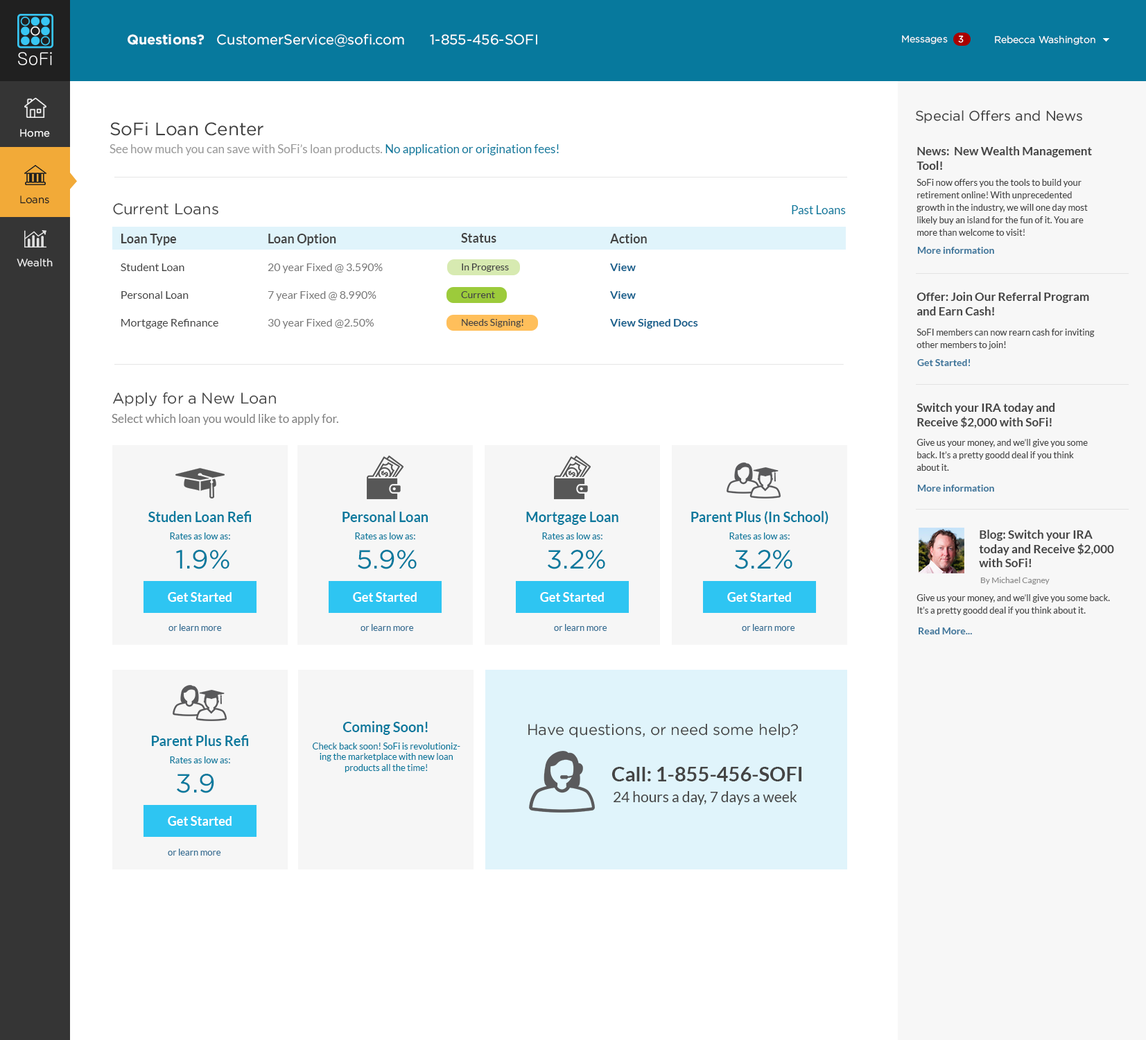
<style>
.page{position:relative;width:1146px;height:1040px;background:#ffffff}
.page>*{position:absolute;margin:0}
.t1{font:13.9px "Gotham-Book";color:#ffffff}
.t2{font:13.9px "Gotham-Bold";color:#ffffff}
.t3{font:9.7px "Gotham-Book";color:#fcfcfc}
.t4{font:9px "Gotham-Book";color:#ffffff}
.t5{font:9.7px "Gotham-Book";color:#ffffff}
.t6{font:13.9px "Gotham-Book";color:#444444}
.t7{font:18px "Gotham-Book";color:#3f3f3f}
.t8{font:10.4px "Gotham-Book";color:#ffffff}
.t9{font:11.8px "Lato-Regular";color:#989898}
.t10{font:11.8px "Lato-Regular";color:#07799d}
.t11{font:11.8px "Lato-Bold";color:#444444}
.t12{font:9px/12.5px "Lato-Regular";color:#444444}
.t13{font:10.4px "Gotham-Book";color:#202020}
.t14{font:15.3px "Gotham-Book";color:#444444}
.t15{font:11.1px/27.7px "Lato-Regular";color:#444444}
.t16{font:12.5px/27.7px "Lato-Bold";color:#444444}
.t17{font:11.1px/27.7px "Lato-Regular";color:#787878}
.t18{font:9.7px/27.7px "Lato-Regular";color:#444444}
.t19{font:11.1px/27.7px "Lato-Bold";color:#14608d}
.t20{font:10.4px "Gotham-Book";color:#efefef}
.t21{font:9.7px "Lato-Bold";color:#3a749a}
.t22{font:11.8px "Lato-Regular";color:#808080}
.t23{font:13.9px "Lato-Bold";color:#07799d}
.t24{font:9px "Lato-Regular";color:#07799d}
.t25{font:26.4px "Gotham-Book";color:#07799d}
.t26{font:8.3px "Lato-Regular";color:#8c8c8c}
.t27{font:12.5px "Lato-Bold";color:#ffffff}
.t28{font:9px "Lato-Regular";color:#316c92}
.t29{font:20.1px "Lato-Bold";color:#444444}
.t30{font:14.6px "Lato-Regular";color:#444444}
</style>
<div class="page">
<p class="t1" style="left:128px;top:34px;width:409px;height:13px"><span class="t2">Questions?</span>   CustomerService@sofi.com      1-855-456-SOFI</p>
<p class="t3" style="left:902px;top:35px;width:46px;height:9px">Messages</p>
<p class="t4" style="left:958px;top:35px;width:6px;height:8px">3</p>
<p class="t5" style="left:995px;top:35px;width:101px;height:10px">Rebecca Washington</p>
<p class="t6" style="left:916px;top:110px;width:167px;height:13px">Special Offers and News</p>
<p class="t7" style="left:110px;top:122px;width:154px;height:14px">SoFi Loan Center</p>
<p class="t8" style="left:20px;top:129px;width:30px;height:8px">Home</p>
<p class="t9" style="left:110px;top:144px;width:449px;height:11px">See how much you can save with SoFi’s loan products. <span class="t10">No application or origination fees!</span></p>
<p class="t11" style="left:917px;top:146px;width:175px;height:24px">News:  New Wealth Management Tool!</p>
<p class="t12" style="left:917px;top:179px;width:171px;height:57px">SoFi now offers you the tools to build your retirement online! With unprecedented growth in the industry, we will one day most likely buy an island for the fun of it. You are more than welcome to visit!</p>
<p class="t13" style="left:20px;top:196px;width:29px;height:8px">Loans</p>
<p class="t14" style="left:113px;top:203px;width:105px;height:12px">Current Loans</p>
<p class="t10" style="left:792px;top:205px;width:54px;height:9px">Past Loans</p>
<p class="t15" style="left:121px;top:234px;width:97px;height:95px"><span class="t16">Loan Type<br></span>Student Loan<br>Personal Loan<br>Mortgage Refinance</p>
<p class="t17" style="left:268px;top:234px;width:115px;height:95px"><span class="t16">Loan Option<br></span>20 year Fixed @ 3.590%<br>7 year Fixed @ 8.990%<br>30 year Fixed @2.50%</p>
<p class="t18" style="left:461px;top:233px;width:63px;height:94px"><span class="t16">Status<br></span>In Progress<br>Current<br>Needs Signing!</p>
<p class="t19" style="left:610px;top:234px;width:88px;height:95px"><span class="t16">Action<br></span>View<br>View<br>View Signed Docs</p>
<p class="t20" style="left:17px;top:258px;width:36px;height:9px">Wealth</p>
<p class="t21" style="left:917px;top:247px;width:77px;height:7px">More information</p>
<p class="t11" style="left:917px;top:292px;width:172px;height:24px">Offer: Join Our Referral Program and Earn Cash!</p>
<p class="t12" style="left:917px;top:329px;width:178px;height:21px">SoFI members can now rearn cash for inviting other members to join!</p>
<p class="t21" style="left:917px;top:359px;width:53px;height:7px">Get Started!</p>
<p class="t14" style="left:112px;top:392px;width:164px;height:14px">Apply for a New Loan</p>
<p class="t11" style="left:917px;top:403px;width:138px;height:26px">Switch your IRA today and <br>Receive $2,000 with SoFi!</p>
<p class="t22" style="left:112px;top:414px;width:226px;height:11px">Select which loan you would like to apply for.</p>
<p class="t12" style="left:917px;top:439px;width:171px;height:32px">Give us your money, and we’ll give you some back. It’s a pretty goodd deal if you think about it.</p>
<p class="t21" style="left:917px;top:485px;width:77px;height:7px">More information</p>
<p class="t23" style="left:148px;top:511px;width:103px;height:11px">Studen Loan Refi</p>
<p class="t23" style="left:343px;top:511px;width:85px;height:11px">Personal Loan</p>
<p class="t23" style="left:526px;top:512px;width:93px;height:13px">Mortgage Loan</p>
<p class="t23" style="left:691px;top:511px;width:138px;height:14px">Parent Plus (In School)</p>
<p class="t24" style="left:170px;top:533px;width:60px;height:7px">Rates as low as:</p>
<p class="t24" style="left:355px;top:533px;width:60px;height:7px">Rates as low as:</p>
<p class="t24" style="left:542px;top:533px;width:61px;height:7px">Rates as low as:</p>
<p class="t24" style="left:730px;top:533px;width:60px;height:7px">Rates as low as:</p>
<p class="t11" style="left:979px;top:530px;width:135px;height:37px">Blog: Switch your IRA today and Receive $2,000 with SoFi!</p>
<p class="t25" style="left:176px;top:550px;width:54px;height:19px">1.9%</p>
<p class="t25" style="left:358px;top:550px;width:59px;height:19px">5.9%</p>
<p class="t25" style="left:548px;top:550px;width:57px;height:19px">3.2%</p>
<p class="t25" style="left:735px;top:550px;width:58px;height:19px">3.2%</p>
<p class="t26" style="left:981px;top:577px;width:69px;height:8px">By Michael Cagney</p>
<p class="t27" style="left:168px;top:592px;width:64px;height:10px">Get Started</p>
<p class="t27" style="left:353px;top:592px;width:64px;height:10px">Get Started</p>
<p class="t27" style="left:540px;top:592px;width:64px;height:10px">Get Started</p>
<p class="t27" style="left:727px;top:592px;width:64px;height:10px">Get Started</p>
<p class="t12" style="left:917px;top:594px;width:193px;height:21px">Give us your money, and we’ll give you some back. It’s a pretty goodd deal if you think about it.</p>
<p class="t28" style="left:169px;top:624px;width:53px;height:7px">or learn more</p>
<p class="t28" style="left:361px;top:624px;width:53px;height:7px">or learn more</p>
<p class="t28" style="left:554px;top:624px;width:53px;height:7px">or learn more</p>
<p class="t28" style="left:742px;top:624px;width:53px;height:7px">or learn more</p>
<p class="t21" style="left:919px;top:628px;width:53px;height:7px">Read More...</p>
<p class="t23" style="left:343px;top:721px;width:85px;height:14px">Coming Soon!</p>
<p class="t14" style="left:528px;top:724px;width:270px;height:14px">Have questions, or need some help?</p>
<p class="t23" style="left:152px;top:735px;width:96px;height:11px">Parent Plus Refi</p>
<p class="t24" style="left:313px;top:743px;width:147px;height:30px;text-align:center">Check back soon! SoFi is revolutionizing the marketplace with new loan products all the time!</p>
<p class="t24" style="left:170px;top:757px;width:60px;height:7px">Rates as low as:</p>
<p class="t25" style="left:177px;top:774px;width:37px;height:19px">3.9%</p>
<p class="t29" style="left:612px;top:767px;width:190px;height:15px">Call: 1-855-456-SOFI</p>
<p class="t30" style="left:614px;top:791px;width:184px;height:14px">24 hours a day, 7 days a week</p>
<p class="t27" style="left:168px;top:816px;width:64px;height:10px">Get Started</p>
<p class="t28" style="left:168px;top:849px;width:53px;height:7px">or learn more</p>
</div>
